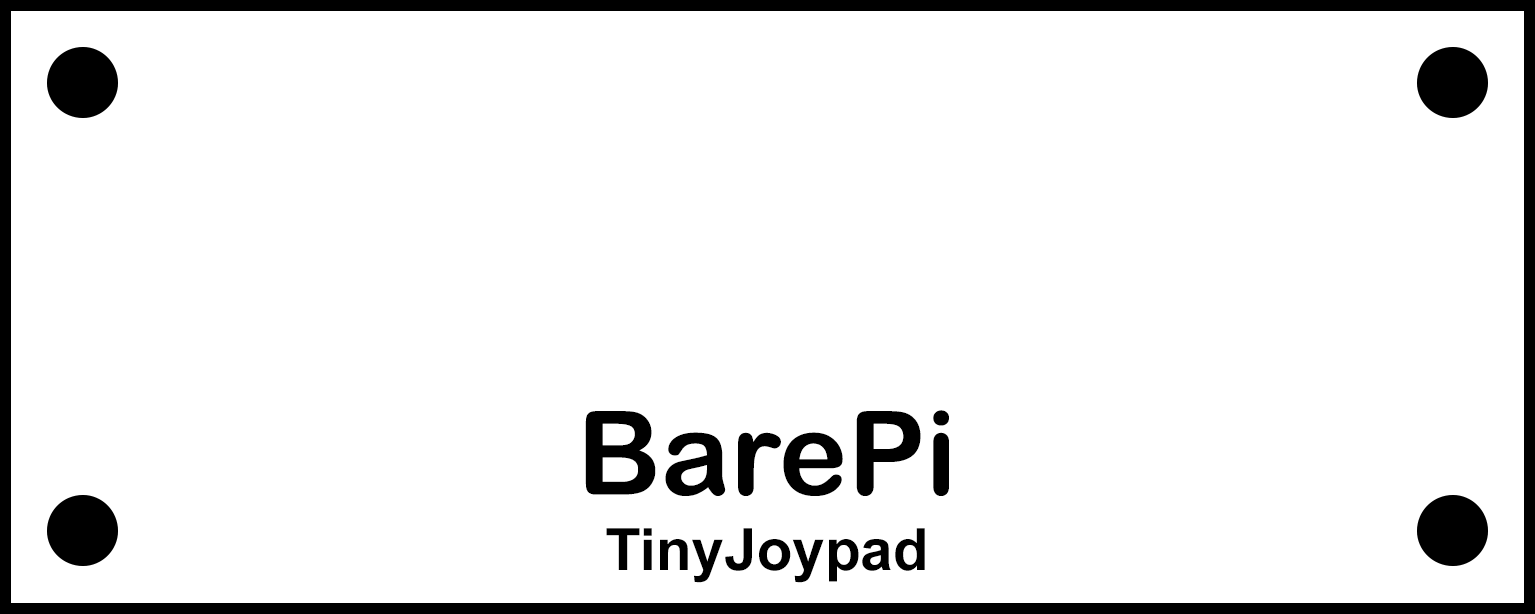
<style>
.page{position:relative;width:1535px;height:614px;background:#ffffff}
.page>*{position:absolute;margin:0}
.t1{font:116.3px "ArialRoundedMTBold";color:#000000}
.t2{font:58.3px "Arial-BoldMT";color:#000000}
</style>
<div class="page">
<p class="t1" style="left:585px;top:410px;width:364px;height:86px">BarePi</p>
<p class="t2" style="left:606px;top:528px;width:319px;height:55px">TinyJoypad</p>
</div>
